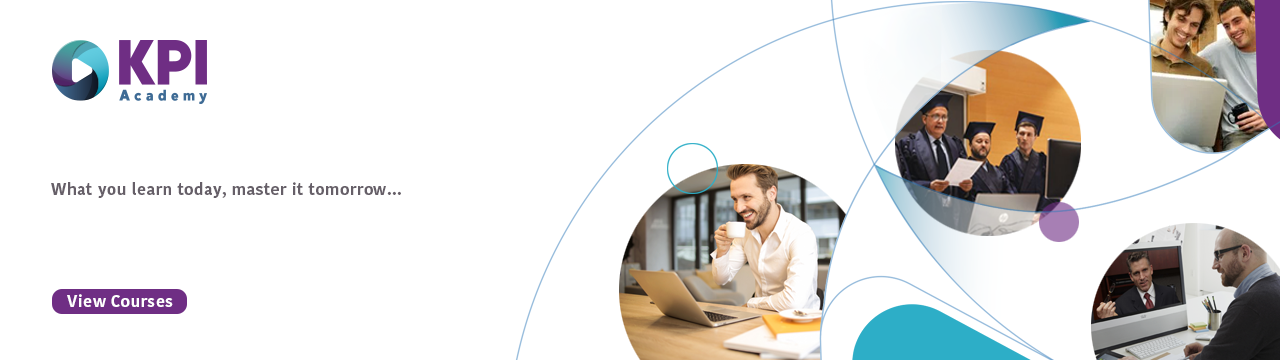
<style>
.page{position:relative;width:1280px;height:360px;background:#ffffff}
.page>*{position:absolute;margin:0}
.t1{font:16px "KohinoorDevanagari-Bold";letter-spacing:0.02em;color:#665f68}
.t2{font:16px "KohinoorDevanagari-Bold";letter-spacing:0.02em;color:#ffffff}
</style>
<div class="page">
<p class="t1" style="left:51px;top:182px;width:350px;height:16px">What you learn today, master it tomorrow...</p>
<p class="t2" style="left:67px;top:294px;width:106px;height:13px">View Courses</p>
</div>
